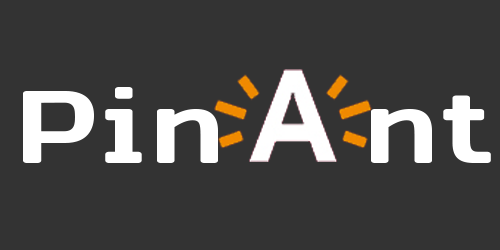
<style>
.page{position:relative;width:500px;height:250px;background:#333333}
.page>*{position:absolute;margin:0}
.t1{font:92.1px "Antwerpen-Regular";color:#ffffff;scale:1.5 1}
</style>
<div class="page">
<p class="t1" style="left:23px;top:87px;width:468px;height:76px">Pin    nt</p>
</div>
